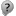
<style>
.page{position:relative;width:16px;height:16px;background:#ffffff}
.page>*{position:absolute;margin:0}
.t1{font:10px "Verdana";color:#000000;font-weight:bold}
</style>
<div class="page">
<p class="t1" style="left:5px;top:3px;width:5px;height:9px">?</p>
</div>
